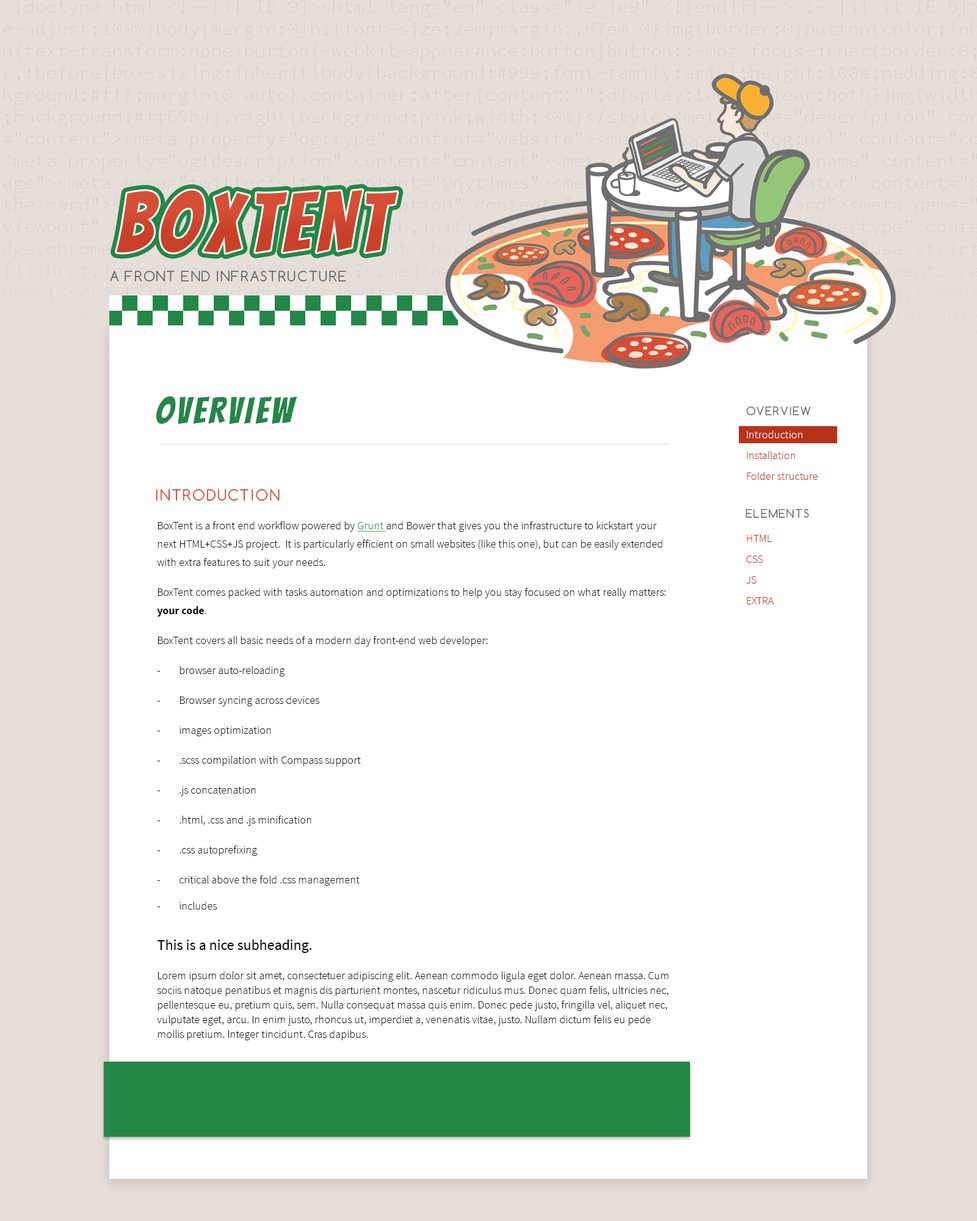
<style>
.page{position:relative;width:977px;height:1221px;background:#ffffff}
.page>*{position:absolute;margin:0}
.t1{font:82.3px "Bangers-Regular";letter-spacing:0.085em;color:#d14831;text-transform:uppercase}
.t2{font:82.3px "Bangers-Regular";letter-spacing:0.085em;color:#d74e37;text-transform:uppercase}
.t3{font:13.5px "Comfortaa-Regular";letter-spacing:0.085em;color:#666666;text-transform:uppercase}
.t4{font:36.6px "Bangers-Regular";letter-spacing:0.085em;color:#248747;text-transform:uppercase}
.t5{font:11px "Comfortaa-Regular";letter-spacing:0.085em;color:#666666;text-transform:uppercase}
.t6{font:11px/14.7px "SourceSansPro-Light";color:#ba311a}
.t7{font:11px/14.7px "SourceSansPro-Light";color:#ffffff}
.t8{font:14.7px "Comfortaa-Regular";letter-spacing:0.085em;color:#d74e37;text-transform:uppercase}
.t9{font:11px/14.7px "SourceSansPro-Light";color:#111111}
.t10{font:11px/18.3px "SourceSansPro-Light";color:#111111}
.t11{font:11px/18.3px "SourceSansPro-Light";color:#248747;text-decoration:underline}
.t12{font:11px/18.3px "SourceSansPro-Bold";color:#111111}
.t13{font:14.7px/11px "SourceSansPro-Regular";color:#000000}
</style>
<div class="page">
<p class="t1" style="left:116px;top:190px;width:281px;height:63px">BoxTent</p>
<p class="t2" style="left:116px;top:190px;width:281px;height:63px">BoxTent</p>
<p class="t3" style="left:110px;top:270px;width:236px;height:12px">a front end infrastructure</p>
<p class="t4" style="left:156px;top:396px;width:141px;height:28px">overview</p>
<p class="t5" style="left:746px;top:406px;width:65px;height:10px">OVERVIEW</p>
<p class="t6" style="left:746px;top:430px;width:71px;height:174px;text-align:right"><span class="t7">Introduction<br></span>Installation<br>Folder structure<br><br><br>HTML<br>CSS<br>JS<br>EXTRA</p>
<p class="t8" style="left:156px;top:489px;width:124px;height:12px">introduction</p>
<p class="t5" style="left:745px;top:508px;width:64px;height:10px">ELEMENTS</p>
<p class="t9" style="left:157px;top:521px;width:511px;height:519px;text-align:right"><span class="t10">BoxTent is a front end workflow powered by </span><span class="t11">Grunt </span><span class="t10">and Bower that gives you the infrastructure to kickstart your next HTML+CSS+JS project.  It is particularly efficient on small websites (like this one), but can be easily extended with extra features to suit your needs.<br>BoxTent comes packed with tasks automation and optimizations to help you stay focused on what really matters: </span><span class="t12">your code</span><span class="t10">.<br>BoxTent covers all basic needs of a modern day front-end web developer:<br>- browser auto-reloading<br>- Browser syncing across devices<br>- images optimization<br>- .scss compilation with Compass support<br>- .js concatenation<br>- .html, .css and .js minification<br>- .css autoprefixing<br>- critical above the fold .css management<br></span>-  includes<br><br><br><span class="t13">This is a nice subheading.<br></span><br>Lorem ipsum dolor sit amet, consectetuer adipiscing elit. Aenean commodo ligula eget dolor. Aenean massa. Cum sociis natoque penatibus et magnis dis parturient montes, nascetur ridiculus mus. Donec quam felis, ultricies nec, pellentesque eu, pretium quis, sem. Nulla consequat massa quis enim. Donec pede justo, fringilla vel, aliquet nec, vulputate eget, arcu. In enim justo, rhoncus ut, imperdiet a, venenatis vitae, justo. Nullam dictum felis eu pede mollis pretium. Integer tincidunt. Cras dapibus. <br><br><br><span class="t13"></span></p>
</div>
